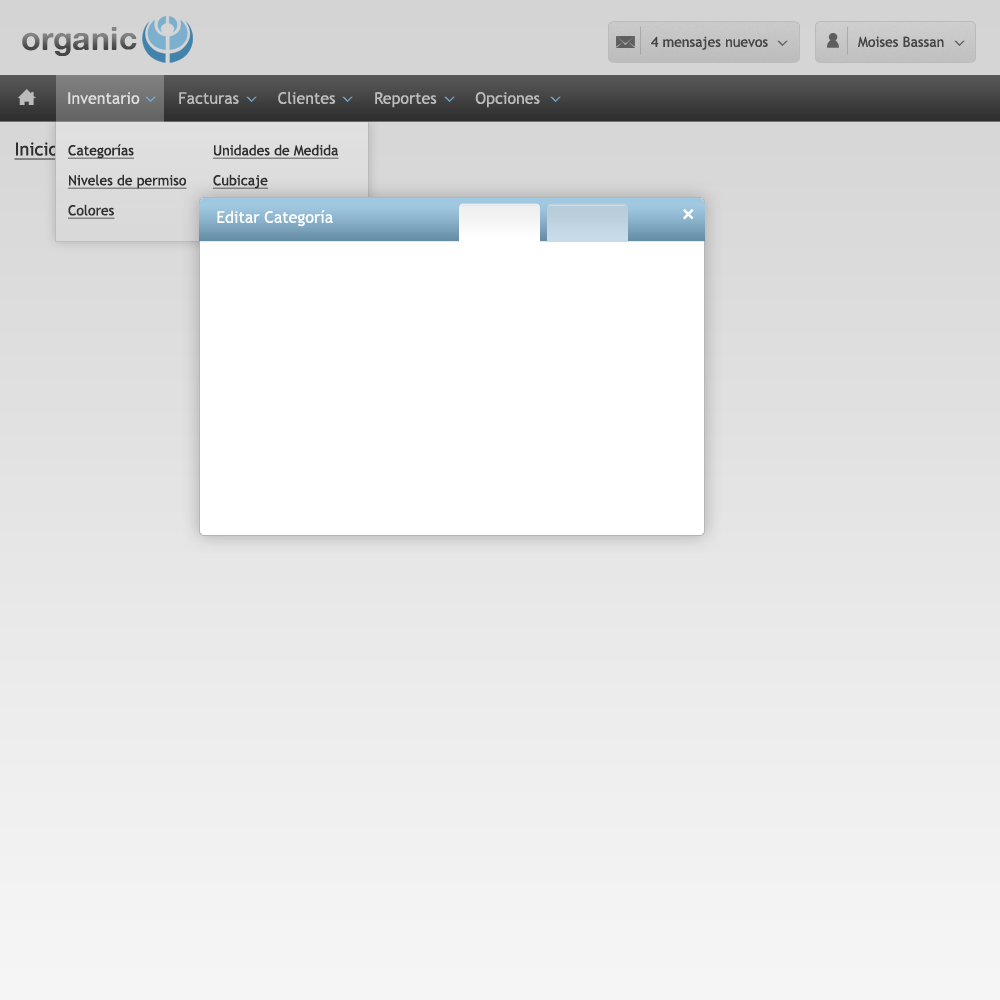
<style>
.page{position:relative;width:1000px;height:1000px}
.page>*{position:absolute;margin:0}
.t1{font:32.5px "AlteHaasGrotesk_Bold"}
.t2{font:14px "TrebuchetMS";color:#454545}
.t3{font:17.3px "LucidaSans";color:#656565;scale:0.5 1}
.t4{font:16px "TrebuchetMS";color:#cccccc}
.t5{font:16px "TrebuchetMS";color:#ffffff}
.t6{font:17.3px "LucidaSans";color:#67add9;scale:0.5 1}
.t7{font:17.3px "LucidaSans";color:#749eb8;scale:0.5 1}
.t8{font:14px/30px "TrebuchetMS";color:#2f2f2f;text-decoration:underline}
.t9{font:30px "TrebuchetMS";color:#ffffff}
</style>
<div class="page">
<p class="t1" style="left:22px;top:27px;width:115px;height:29px">organic</p>
<p class="t2" style="left:651px;top:36px;width:117px;height:14px">4 mensajes nuevos</p>
<p class="t3" style="left:777px;top:40px;width:11px;height:6px;rotate:90deg">&gt;</p>
<p class="t2" style="left:858px;top:36px;width:86px;height:11px">Moises Bassan</p>
<p class="t3" style="left:954px;top:40px;width:11px;height:6px;rotate:90deg">&gt;</p>
<p class="t4" style="left:68px;top:91px;width:472px;height:17px"><span class="t5">Inventario</span>        Facturas        Clientes        Reportes        Opciones</p>
<p class="t6" style="left:145px;top:96px;width:11px;height:6px;rotate:90deg">&gt;</p>
<p class="t7" style="left:246px;top:96px;width:11px;height:6px;rotate:90deg">&gt;</p>
<p class="t7" style="left:342px;top:96px;width:11px;height:6px;rotate:90deg">&gt;</p>
<p class="t7" style="left:444px;top:96px;width:11px;height:6px;rotate:90deg">&gt;</p>
<p class="t7" style="left:550px;top:96px;width:11px;height:6px;rotate:90deg">&gt;</p>
<p class="t8" style="left:68px;top:144px;width:119px;height:75px">Categorías<br>Niveles de permiso<br>Colores</p>
<p class="t8" style="left:213px;top:144px;width:126px;height:75px">Unidades de Medida<br>Cubicaje<br>Otra cosa</p>
<p class="t9" style="left:683px;top:209px;width:11px;height:11px;rotate:-45deg">+</p>
<p class="t5" style="left:217px;top:210px;width:116px;height:17px">Editar Categoría</p>
</div>
